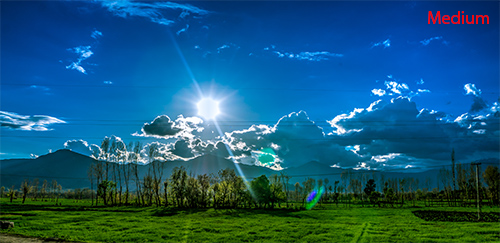
<style>
.page{position:relative;width:500px;height:243px}
.page>*{position:absolute;margin:0}
.t1{font:18px "MyriadPro-Regular";color:#f70404}
</style>
<div class="page">
<p class="t1" style="left:428px;top:11px;width:61px;height:13px">Medium</p>
</div>
